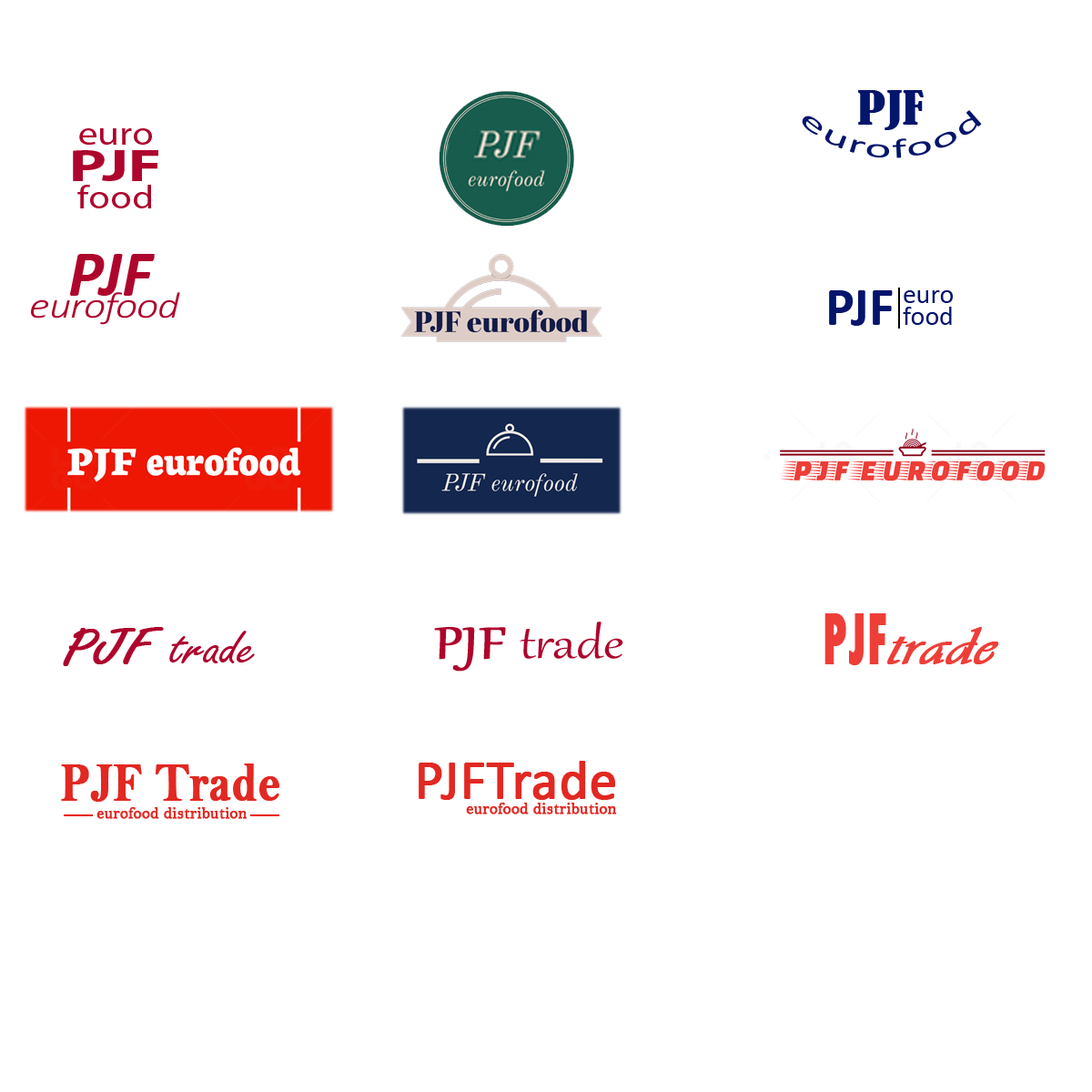
<style>
.page{position:relative;width:1092px;height:1092px;background:#ffffff}
.page>*{position:absolute;margin:0}
.t1{font:43.7px "BernardMT-Condensed";letter-spacing:0.01em;color:#04156c;scale:1.2 1}
.t2{font:27.3px "Calibri";letter-spacing:0.01em;color:#04156c;scale:1.5 1}
.t3{font:32.8px/36.4px "MyriadPro-Regular";color:#ae052d;scale:1.2 1}
.t4{font:45.5px/36.4px "MyriadPro-Bold";color:#ae052d;scale:1.4 1}
.t5{font:32.8px/27.3px "MyriadPro-Regular";color:#ae052d;scale:1.2 1}
.t6{font:37.1px/21.8px "Calibri-LightItalic";letter-spacing:-0.025em;color:#ae052d;scale:1.18 1}
.t7{font:65.5px/21.8px "Calibri-BoldItalic";color:#ae052d}
.t8{font:54.6px "Calibri-Bold";color:#04156c}
.t9{font:27.3px/21.8px "Calibri";color:#04156c}
.t10{font:76.4px "TwCenMT-CondensedExtraBold";color:#ee3e38;font-weight:bold;scale:0.64 1}
.t11{font:54.6px "FreestyleScript-Regular";color:#ae052d;scale:1.2 1}
.t12{font:54.6px "FreestyleScript-Regular";color:#ae052d;font-weight:bold;scale:1.2 1}
.t13{font:54.6px "Gabriola";color:#ae052d;scale:1.2 1}
.t14{font:54.6px "Gabriola";color:#ae052d;font-weight:bold;scale:1.2 1}
.t15{font:54.6px "Vivaldii";color:#ee3e38;font-weight:bold;scale:1.2 1}
.t16{font:55.1px "Calibri";color:#e22822;font-weight:bold}
.t17{font:55.1px "BellMTBold";color:#e22822;font-weight:bold;scale:0.82 1}
.t18{font:16.4px "BellMT";color:#e22822;font-weight:bold}
</style>
<div class="page">
<p class="t1" style="left:858px;top:90px;width:66px;height:40px">PJF</p>
<p class="t2" style="left:802px;top:110px;width:180px;height:48px;text-align:center">eurofood</p>
<p class="t3" style="left:73px;top:128px;width:85px;height:80px;text-align:center">euro<br><span class="t4">PJF<br></span><span class="t5">food</span></p>
<p class="t6" style="left:31px;top:254px;width:149px;height:71px;text-align:center"><span class="t7">PJF<br></span>eurofood</p>
<p class="t8" style="left:829px;top:290px;width:64px;height:36px">PJF</p>
<p class="t9" style="left:903px;top:290px;width:50px;height:35px;text-align:center">euro<br>food</p>
<p class="t10" style="left:824px;top:613px;width:62px;height:52px">PJF</p>
<p class="t11" style="left:63px;top:627px;width:192px;height:39px"><span class="t12">PJF </span>trade</p>
<p class="t13" style="left:434px;top:622px;width:189px;height:50px"><span class="t14">PJF </span>trade</p>
<p class="t15" style="left:887px;top:627px;width:112px;height:37px">trade</p>
<p class="t16" style="left:419px;top:761px;width:196px;height:39px">PJFTrade</p>
<p class="t17" style="left:61px;top:763px;width:218px;height:39px">PJF Trade</p>
<p class="t18" style="left:96px;top:807px;width:152px;height:12px">eurofood distribution</p>
<p class="t18" style="left:466px;top:803px;width:151px;height:11px">eurofood distribution</p>
</div>
